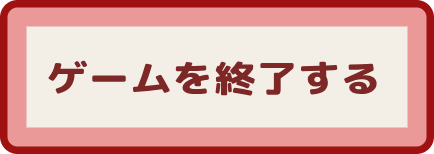
<style>
.page{position:relative;width:434px;height:154px;background:#f3eee6}
.page>*{position:absolute;margin:0}
.t1{font:37.2px "rounded-l-mplus-2p-heavy";color:#7d2727;scale:1.13 1}
.t2{font:21.2px "rounded-l-mplus-2p-heavy";color:#000000;scale:1.13 1}
</style>
<div class="page">
<p class="t1" style="left:48px;top:60px;width:329px;height:36px"><span class="t2">　</span>ゲームを終了する</p>
</div>
